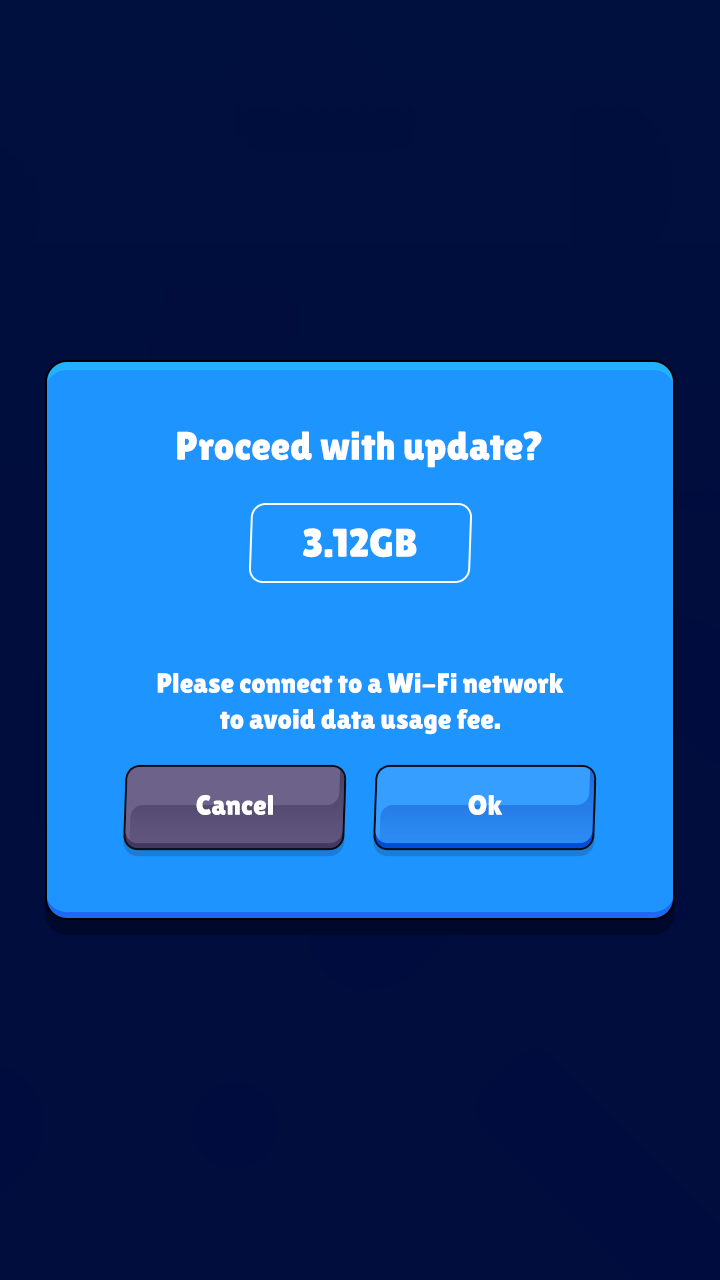
<style>
.page{position:relative;width:720px;height:1280px;background:#1e94ff}
.page>*{position:absolute;margin:0}
.t1{font:40px "LilitaOne";color:#ffffff}
.t2{font:28px/36px "LilitaOne";color:#ffffff}
.t3{font:28px "LilitaOne";color:#ffffff}
</style>
<div class="page">
<p class="t1" style="left:177px;top:431px;width:365px;height:37px">Proceed with update?</p>
<p class="t1" style="left:303px;top:528px;width:114px;height:30px">3.12GB</p>
<p class="t2" style="left:157px;top:673px;width:407px;height:62px;text-align:center">Please connect to a Wi-Fi network<br>to avoid data usage fee.</p>
<p class="t3" style="left:196px;top:795px;width:77px;height:20px">Cancel</p>
<p class="t3" style="left:468px;top:795px;width:35px;height:20px">Ok</p>
</div>
